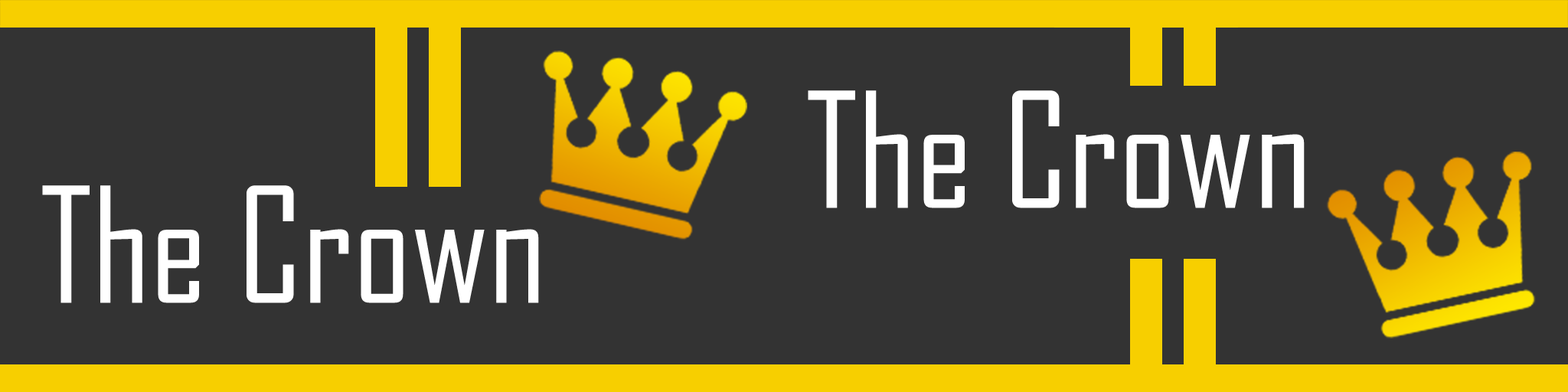
<style>
.page{position:relative;width:1568px;height:392px;background:#333333}
.page>*{position:absolute;margin:0}
.t1{font:153.1px "AgencyFB-Reg";color:#ffffff}
</style>
<div class="page">
<p class="t1" style="left:808px;top:90px;width:497px;height:118px">The Crown</p>
<p class="t1" style="left:42px;top:185px;width:497px;height:118px">The Crown</p>
</div>
